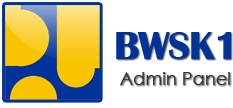
<style>
.page{position:relative;width:233px;height:108px;background:#ffffff}
.page>*{position:absolute;margin:0}
.t1{font:40px "BritannicBold";letter-spacing:-0.025em;color:#003399}
.t2{font:18px "CenturyGothic";color:#373737}
</style>
<div class="page">
<p class="t1" style="left:116px;top:32px;width:115px;height:27px">BWSK1</p>
<p class="t2" style="left:120px;top:72px;width:110px;height:13px">Admin Panel</p>
</div>
